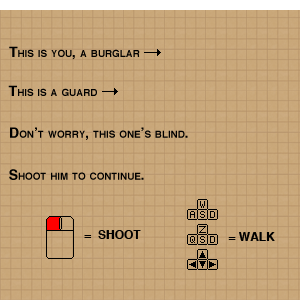
<style>
.page{position:relative;width:300px;height:300px}
.page>*{position:absolute;margin:0}
.t1{font:14px "Helvetica-Bold";color:#000000;font-variant:small-caps}
.t2{font:12px "Helvetica-Bold";color:#000000;font-variant:small-caps}
</style>
<div class="page">
<p class="t1" style="left:9px;top:46px;width:131px;height:14px">This is you, a burglar</p>
<p class="t1" style="left:8px;top:85px;width:89px;height:11px">This is a guard</p>
<p class="t1" style="left:10px;top:127px;width:178px;height:13px">Don’t worry, this one’s blind.</p>
<p class="t1" style="left:9px;top:169px;width:135px;height:11px">Shoot him to continue.</p>
<p class="t2" style="left:84px;top:230px;width:57px;height:9px">=  SHOOT</p>
<p class="t2" style="left:228px;top:232px;width:47px;height:9px">= WALK</p>
</div>
